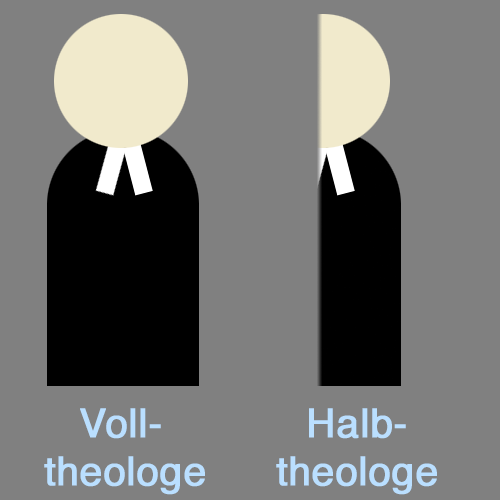
<style>
.page{position:relative;width:500px;height:500px;background:#808080}
.page>*{position:absolute;margin:0}
.t1{font:40px "Helvetica";color:#badfff;font-weight:bold}
</style>
<div class="page">
<p class="t1" style="left:44px;top:408px;width:161px;height:87px;text-align:center">Voll-<br>theologe</p>
<p class="t1" style="left:276px;top:408px;width:161px;height:87px;text-align:center">Halb-<br>theologe</p>
</div>
